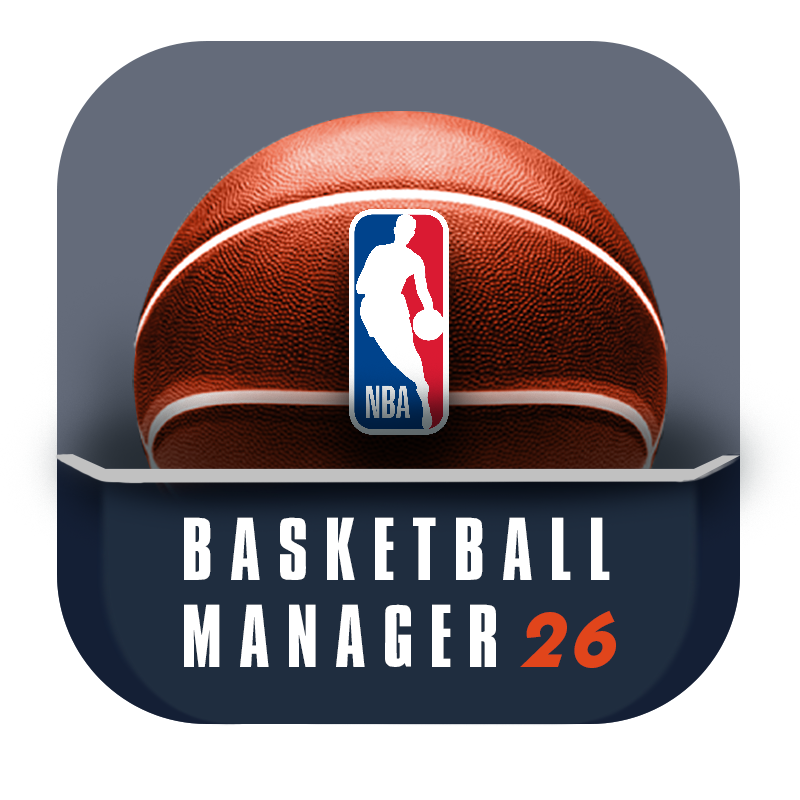
<style>
.page{position:relative;width:800px;height:800px;background:#ffffff}
.page>*{position:absolute;margin:0}
.t1{font:77.7px/87.5px "NBALakers";color:#ffffff}
.t2{font:77.7px/87.5px "NeueKabel-ExtraBold";color:#e1451b;font-style:italic}
</style>
<div class="page">
<p class="t1" style="left:184px;top:517px;width:432px;height:151px;text-align:justify">BASKETBALL<br>MANAGER<span class="t2">26</span></p>
</div>
